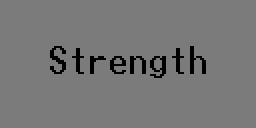
<style>
.page{position:relative;width:256px;height:128px;background:#7b7b7b}
.page>*{position:absolute;margin:0}
.t1{font:36px "Terminal";color:#000000}
</style>
<div class="page">
<p class="t1" style="left:50px;top:46px;width:156px;height:32px">Strength</p>
</div>
